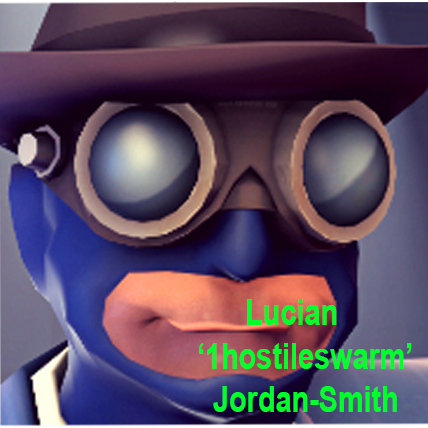
<style>
.page{position:relative;width:428px;height:428px}
.page>*{position:absolute;margin:0}
.t1{font:36px "Arial-BoldMT";color:#00ff2b;scale:0.8 1}
.t2{font:36px "Arial-BoldMT";color:#00ebe7;scale:0.8 1}
</style>
<div class="page">
<p class="t1" style="left:199px;top:299px;width:213px;height:113px"><span class="t2">  </span>    Lucian <br>‘1hostileswarm’<br>  Jordan-Smith</p>
</div>
